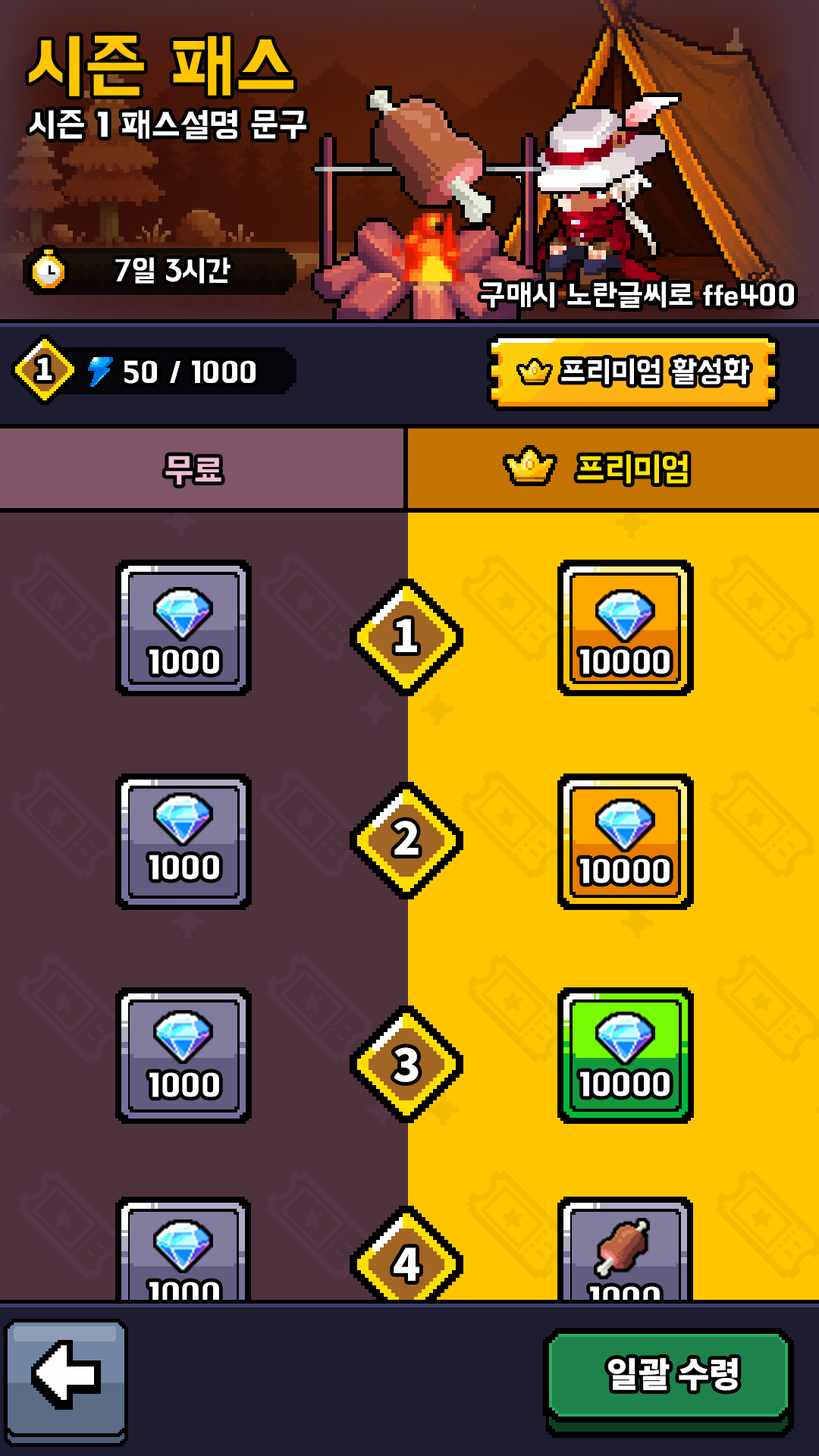
<style>
.page{position:relative;width:819px;height:1456px}
.page>*{position:absolute;margin:0}
.t1{font:72px "BMHANNAProOTF";color:#ffc600}
.t2{font:34.1px "BMHANNAProOTF";color:#ffffff}
.t3{font:30.3px "BMHANNAProOTF";color:#ffffff}
.t4{font:30.3px "NotoSansKR-Black";color:#ffffff}
.t5{font:34.1px "BMHANNAProOTF";color:#efbed3}
.t6{font:34.1px "BMHANNAProOTF";color:#ffe400}
.t7{font:45.5px "NotoSansKR-Black";color:#ffffff}
.t8{font:32.7px "BMHANNAProOTF";color:#ffffff}
.t9{font:34.1px "NotoSansKR-Black";color:#ffffff}
</style>
<div class="page">
<p class="t1" style="left:29px;top:36px;width:264px;height:60px">시즌 패스</p>
<p class="t2" style="left:30px;top:110px;width:276px;height:30px">시즌 1 패스설명 문구</p>
<p class="t3" style="left:115px;top:257px;width:116px;height:27px">7일 3시간</p>
<p class="t3" style="left:481px;top:281px;width:313px;height:27px">구매시 노란글씨로 ffe400</p>
<p class="t4" style="left:36px;top:357px;width:16px;height:24px">1</p>
<p class="t3" style="left:124px;top:360px;width:132px;height:24px">50 / 1000</p>
<p class="t3" style="left:561px;top:358px;width:188px;height:26px">프리미엄 활성화</p>
<p class="t5" style="left:165px;top:456px;width:56px;height:29px">무료</p>
<p class="t6" style="left:577px;top:454px;width:111px;height:30px">프리미엄</p>
<p class="t7" style="left:395px;top:619px;width:22px;height:33px">1</p>
<p class="t8" style="left:149px;top:649px;width:70px;height:25px">1000</p>
<p class="t7" style="left:394px;top:821px;width:25px;height:34px">2</p>
<p class="t7" style="left:394px;top:1047px;width:25px;height:35px">3</p>
<p class="t7" style="left:394px;top:1247px;width:25px;height:34px">4</p>
<p class="t9" style="left:607px;top:1357px;width:131px;height:34px">일괄 수령</p>
</div>
